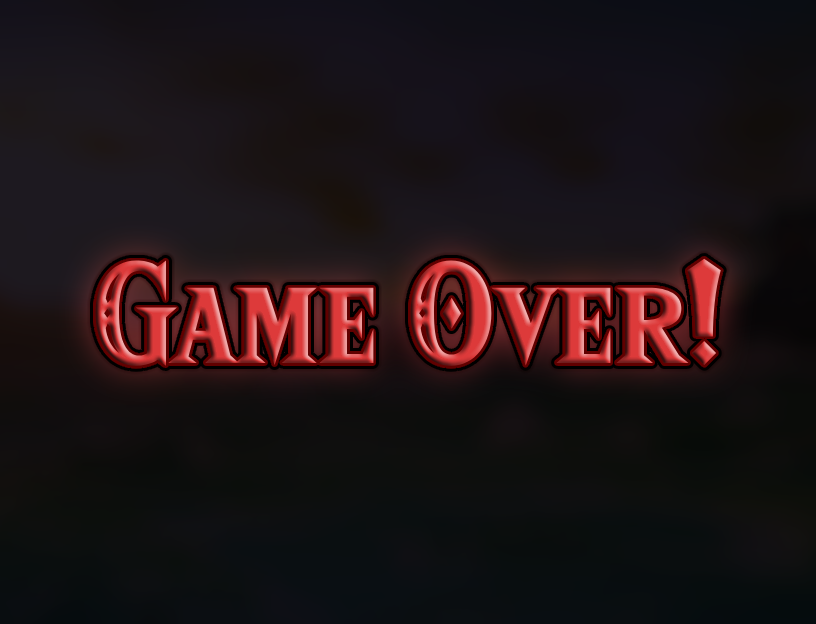
<style>
.page{position:relative;width:816px;height:624px}
.page>*{position:absolute;margin:0}
.t1{font:125px "HyliaSerifBeta-Regular"}
</style>
<div class="page">
<p class="t1" style="left:95px;top:258px;width:626px;height:108px">Game Over!</p>
</div>
